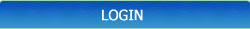
<style>
.page{position:relative;width:250px;height:29px}
.page>*{position:absolute;margin:0}
.t1{font:14px "Tahoma";color:#ffffff;font-weight:bold}
</style>
<div class="page">
<p class="t1" style="left:102px;top:9px;width:41px;height:12px">LOGIN</p>
</div>
